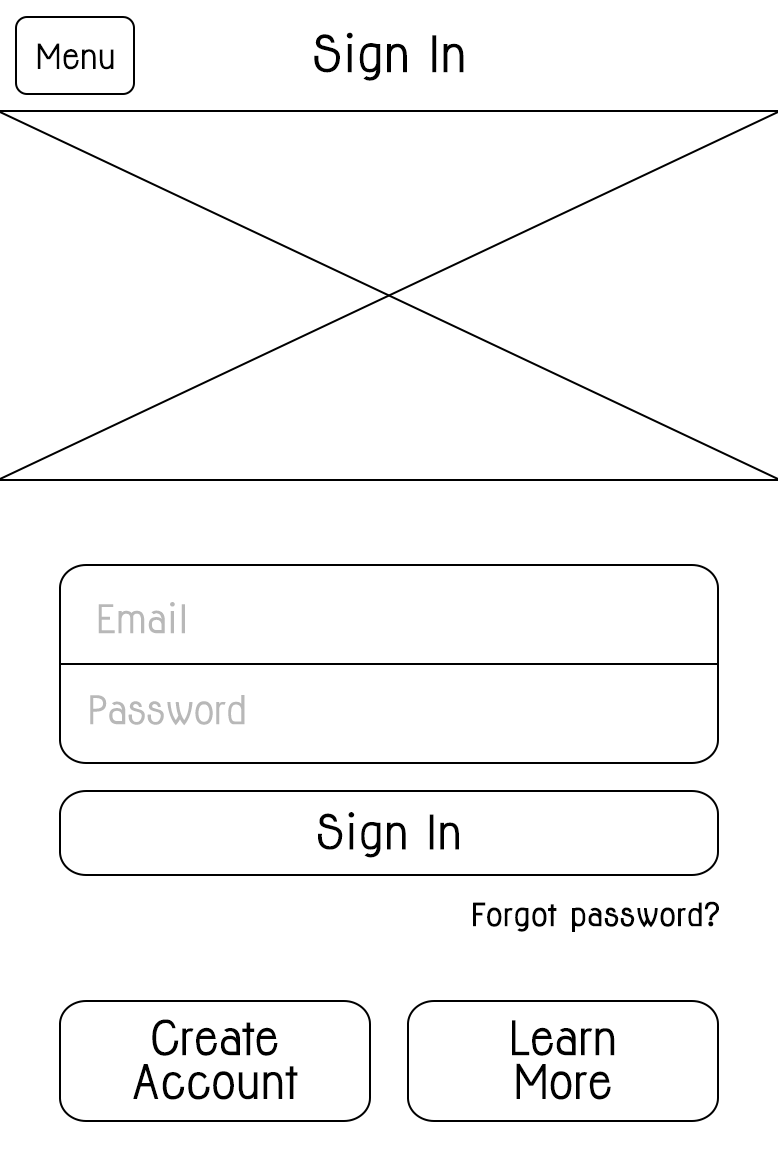
<style>
.page{position:relative;width:778px;height:1167px;background:#ffffff}
.page>*{position:absolute;margin:0}
.t1{font:46.2px "Jolly-Bold";color:#000000}
.t2{font:32px "Jolly-Bold";color:#000000}
.t3{font:36.5px "Jolly-Bold";color:#b8b8b8}
.t4{font:43.7px "Jolly-Bold";color:#000000}
.t5{font:29.2px "Jolly-Bold";color:#000000;font-weight:bold}
.t6{font:43.9px/43.9px "Jolly-Bold";color:#000000}
</style>
<div class="page">
<p class="t1" style="left:314px;top:32px;width:150px;height:49px">Sign In</p>
<p class="t2" style="left:37px;top:43px;width:77px;height:27px">Menu</p>
<p class="t3" style="left:98px;top:602px;width:87px;height:32px">Email</p>
<p class="t3" style="left:90px;top:695px;width:155px;height:31px">Password</p>
<p class="t4" style="left:318px;top:812px;width:141px;height:46px">Sign In</p>
<p class="t5" style="left:473px;top:901px;width:246px;height:31px">Forgot password?</p>
<p class="t6" style="left:133px;top:1019px;width:165px;height:81px;text-align:center">Create<br>Account</p>
<p class="t6" style="left:512px;top:1020px;width:103px;height:80px;text-align:center">Learn<br>More</p>
</div>
